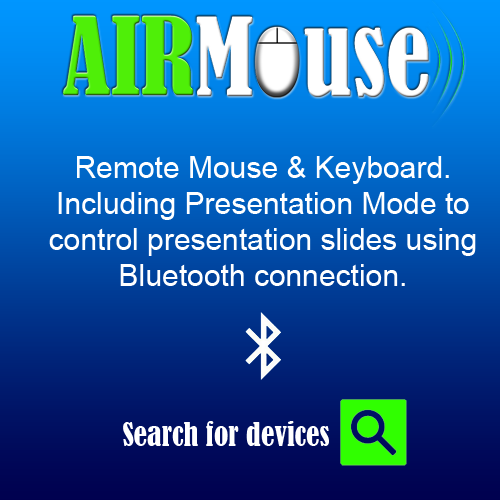
<style>
.page{position:relative;width:500px;height:500px}
.page>*{position:absolute;margin:0}
.t1{font:30px "ArialMT";color:#ffffff}
.t2{font:30px "BernardMT-Condensed";color:#ffffff}
</style>
<div class="page">
<p class="t1" style="left:49px;top:156px;width:427px;height:130px;text-align:center">Remote Mouse &amp; Keyboard.<br>Including Presentation Mode to control presentation slides using Bluetooth connection.</p>
<p class="t2" style="left:123px;top:421px;width:206px;height:25px">Search for devices</p>
</div>
